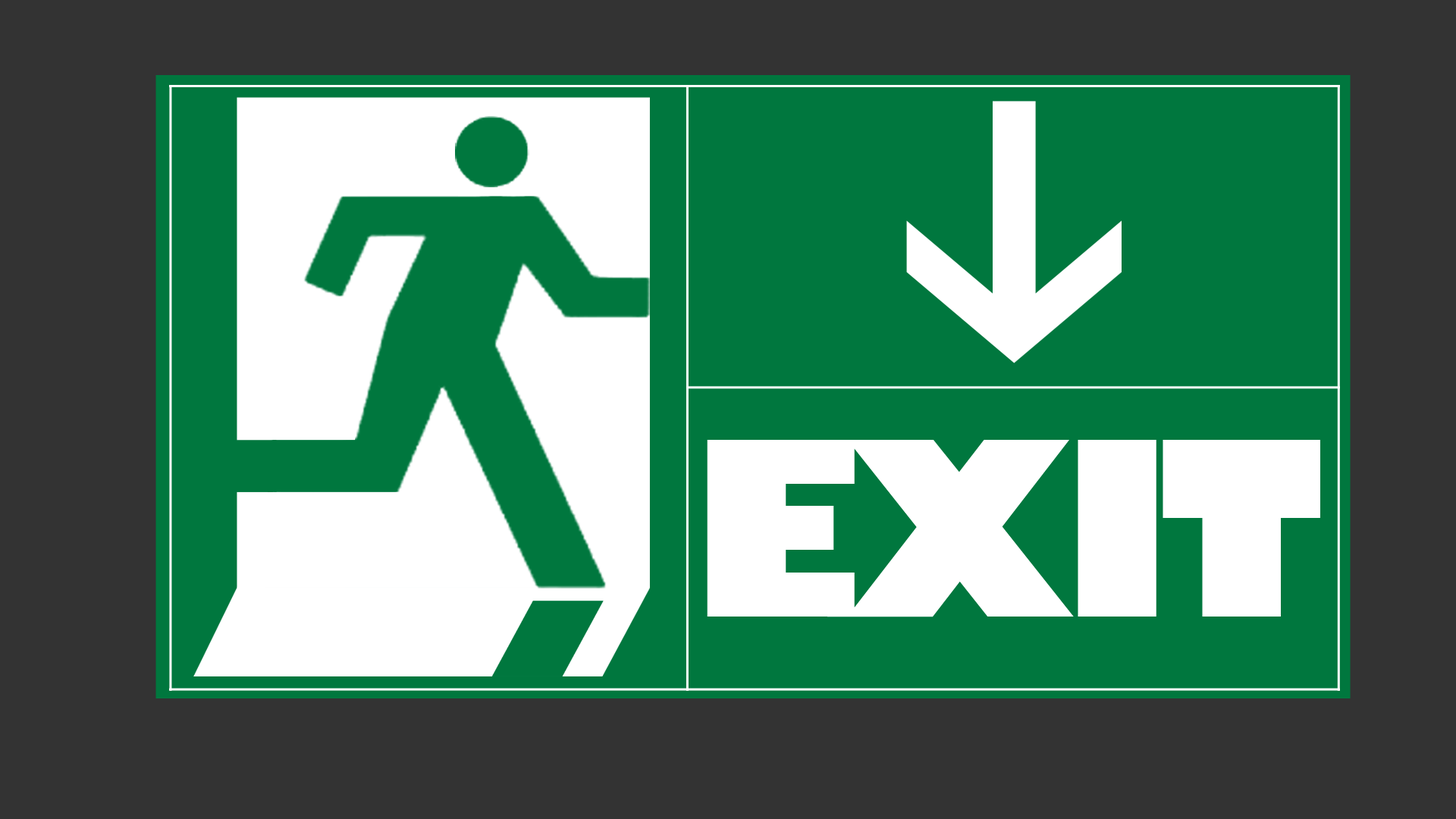
<style>
.page{position:relative;width:1456px;height:819px;background:#333333}
.page>*{position:absolute;margin:0}
.t1{font:237.4px "GillSans-UltraBold";letter-spacing:-0.065em;color:#ffffff}
</style>
<div class="page">
<p class="t1" style="left:707px;top:440px;width:613px;height:177px">EXIT</p>
</div>
